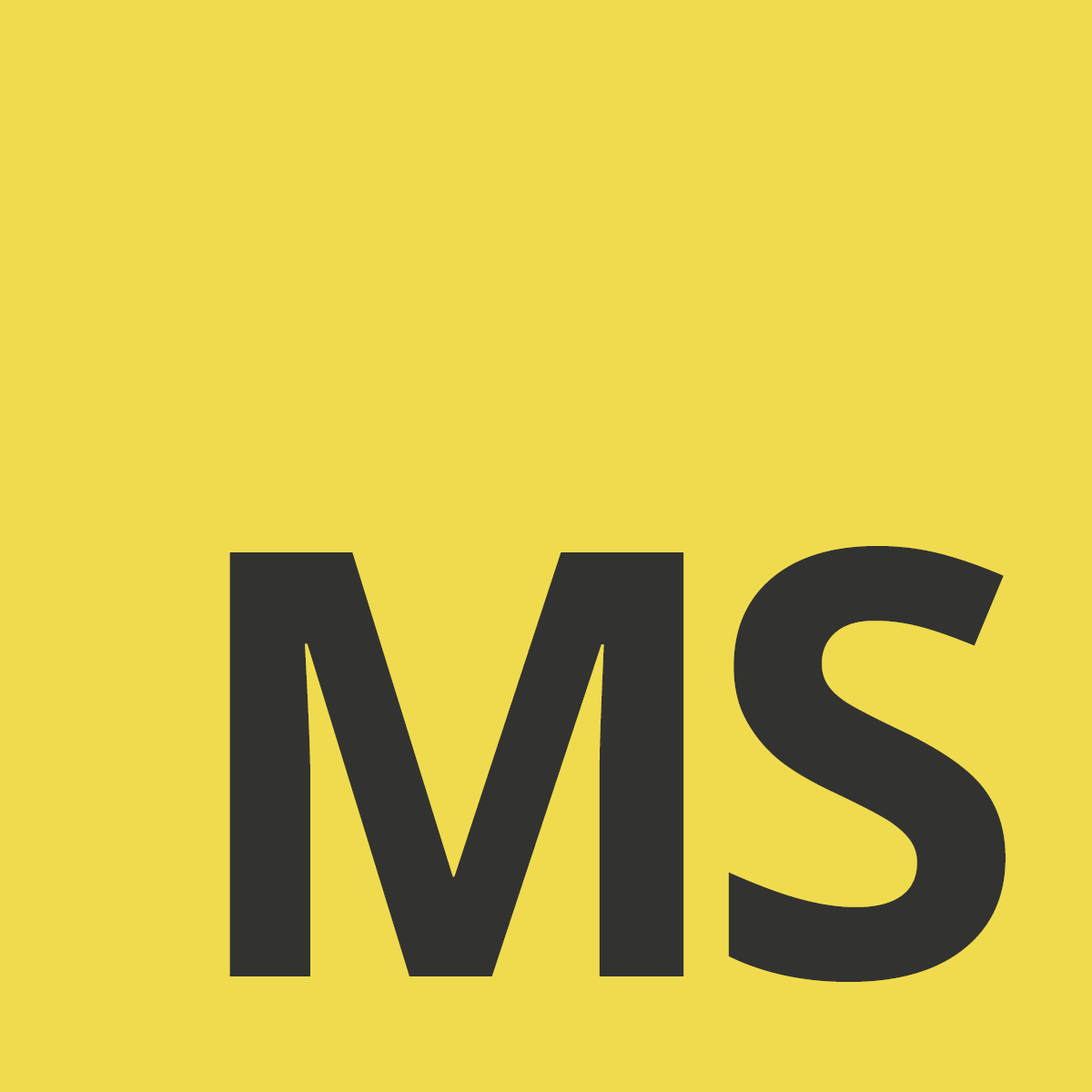
<style>
.page{position:relative;width:1092px;height:1092px;background:#f0db4f}
.page>*{position:absolute;margin:0}
.t1{font:594.5px "OpenSans-Bold";letter-spacing:-0.06em;color:#323330;text-transform:uppercase}
</style>
<div class="page">
<p class="t1" style="left:229px;top:546px;width:777px;height:436px">ms</p>
</div>
